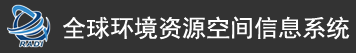
<style>
.page{position:relative;width:356px;height:53px;background:#333333}
.page>*{position:absolute;margin:0}
.t1{font:24px "SimHei";color:#ffffff}
</style>
<div class="page">
<p class="t1" style="left:63px;top:16px;width:287px;height:24px">全球环境资源空间信息系统</p>
</div>
